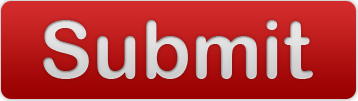
<style>
.page{position:relative;width:358px;height:101px}
.page>*{position:absolute;margin:0}
.t1{font:80px "ArialRoundedMTBold";color:#d5d5d5}
</style>
<div class="page">
<p class="t1" style="left:43px;top:20px;width:270px;height:59px">Submit</p>
</div>
